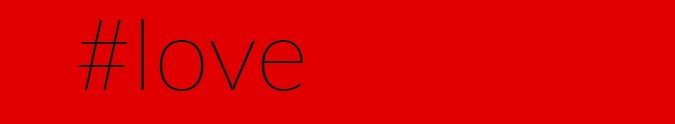
<style>
.page{position:relative;width:675px;height:124px;background:#e10000}
.page>*{position:absolute;margin:0}
.t1{font:100px "Lato-Thin";color:#141819}
</style>
<div class="page">
<p class="t1" style="left:78px;top:19px;width:225px;height:72px">#love</p>
</div>
